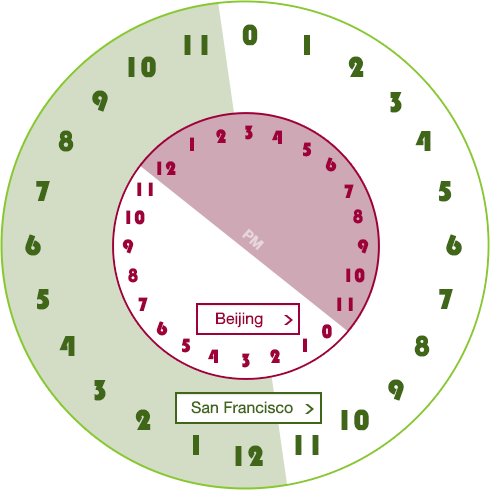
<style>
.page{position:relative;width:490px;height:490px;background:#ffffff}
.page>*{position:absolute;margin:0}
.t1{font:30px "Bauhaus93";color:#406618;font-variant:small-caps}
.t2{font:20px "Bauhaus93";color:#9e0039}
.t3{font:14px "HelveticaNeue-Bold";color:#e8d6dd}
.t4{font:16px "HelveticaNeue";color:#9e0039}
.t5{font:16px "HelveticaNeue";color:#406618}
</style>
<div class="page">
<p class="t1" style="left:242px;top:24px;width:16px;height:22px">0</p>
<p class="t1" style="left:184px;top:35px;width:24px;height:20px">11</p>
<p class="t1" style="left:128px;top:56px;width:28px;height:22px">10</p>
<p class="t1" style="left:348px;top:56px;width:16px;height:21px">2</p>
<p class="t1" style="left:92px;top:90px;width:16px;height:22px">9</p>
<p class="t1" style="left:390px;top:92px;width:12px;height:21px">3</p>
<p class="t2" style="left:245px;top:125px;width:8px;height:15px">3</p>
<p class="t1" style="left:58px;top:130px;width:16px;height:22px">8</p>
<p class="t2" style="left:190px;top:137px;width:4px;height:14px">1</p>
<p class="t2" style="left:216px;top:129px;width:10px;height:14px">2</p>
<p class="t2" style="left:272px;top:130px;width:10px;height:14px">4</p>
<p class="t1" style="left:415px;top:131px;width:16px;height:20px">4</p>
<p class="t2" style="left:302px;top:142px;width:10px;height:15px">5</p>
<p class="t2" style="left:157px;top:161px;width:19px;height:14px">12</p>
<p class="t2" style="left:325px;top:157px;width:12px;height:15px">6</p>
<p class="t1" style="left:36px;top:181px;width:14px;height:20px">7</p>
<p class="t2" style="left:137px;top:182px;width:16px;height:14px">11</p>
<p class="t2" style="left:344px;top:184px;width:10px;height:14px">7</p>
<p class="t1" style="left:438px;top:181px;width:14px;height:21px">5</p>
<p class="t2" style="left:353px;top:209px;width:10px;height:15px">8</p>
<p class="t2" style="left:126px;top:210px;width:19px;height:15px">10</p>
<p class="t3" style="left:242px;top:228px;width:22px;height:22px;rotate:42deg">PM</p>
<p class="t1" style="left:25px;top:234px;width:16px;height:22px">6</p>
<p class="t2" style="left:122px;top:239px;width:12px;height:15px">9</p>
<p class="t2" style="left:357px;top:239px;width:12px;height:15px">9</p>
<p class="t1" style="left:446px;top:234px;width:16px;height:22px">6</p>
<p class="t2" style="left:128px;top:268px;width:10px;height:15px">8</p>
<p class="t2" style="left:346px;top:268px;width:19px;height:15px">10</p>
<p class="t1" style="left:36px;top:289px;width:14px;height:21px">5</p>
<p class="t1" style="left:439px;top:289px;width:14px;height:20px">7</p>
<p class="t2" style="left:138px;top:297px;width:10px;height:14px">7</p>
<p class="t2" style="left:337px;top:297px;width:16px;height:14px">11</p>
<p class="t4" style="left:216px;top:312px;width:47px;height:16px">Beijing</p>
<p class="t2" style="left:156px;top:321px;width:12px;height:15px">6</p>
<p class="t2" style="left:322px;top:324px;width:10px;height:15px">0</p>
<p class="t1" style="left:59px;top:336px;width:16px;height:20px">4</p>
<p class="t2" style="left:181px;top:338px;width:10px;height:15px">5</p>
<p class="t2" style="left:303px;top:338px;width:4px;height:14px">1</p>
<p class="t1" style="left:414px;top:335px;width:16px;height:22px">8</p>
<p class="t2" style="left:208px;top:349px;width:10px;height:14px">4</p>
<p class="t2" style="left:242px;top:353px;width:8px;height:15px">3</p>
<p class="t2" style="left:270px;top:349px;width:10px;height:14px">2</p>
<p class="t1" style="left:94px;top:380px;width:12px;height:21px">3</p>
<p class="t1" style="left:388px;top:379px;width:16px;height:22px">9</p>
<p class="t5" style="left:191px;top:401px;width:102px;height:13px">San Francisco</p>
<p class="t1" style="left:135px;top:409px;width:16px;height:21px">2</p>
<p class="t1" style="left:341px;top:409px;width:28px;height:22px">10</p>
<p class="t1" style="left:295px;top:435px;width:24px;height:20px">11</p>
<p class="t1" style="left:235px;top:445px;width:28px;height:21px">12</p>
</div>
